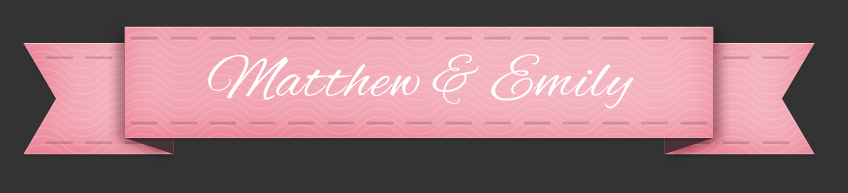
<style>
.page{position:relative;width:848px;height:193px;background:#333333}
.page>*{position:absolute;margin:0}
.t1{font:62.2px "AlexBrush-Regular";color:#ffffff}
</style>
<div class="page">
<p class="t1" style="left:208px;top:54px;width:426px;height:55px">Matthew &amp; Emily</p>
</div>
